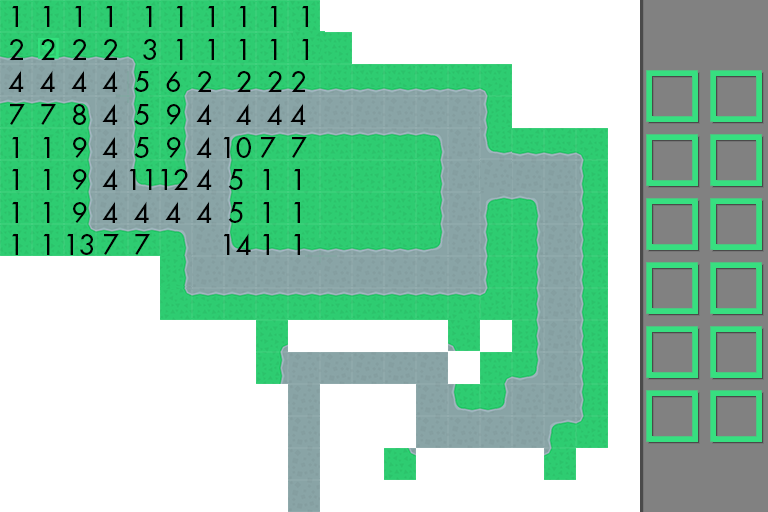
<style>
.page{position:relative;width:768px;height:512px;background:#ffffff}
.page>*{position:absolute;margin:0}
.t1{font:27.1px "Futura";color:#000000}
</style>
<div class="page">
<p class="t1" style="left:8px;top:6px;width:300px;height:249px">1  1  1  1   1  1  1  1  1  1<br>2  2  2  2   3  1  1  1  1  1<br>4  4  4  4  5  6  2   2  2 2<br>7  7  8  4  5  9  4   4  4 4<br>1  1  9  4  5  9  4 10 7  7<br>1  1  9  4 1112 4  5  1  1<br>1  1  9  4  4  4  4  5  1  1<br>1  1 13 7  7  7  7 14 1  1</p>
</div>
